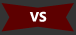
<style>
.page{position:relative;width:76px;height:35px;background:#5d0000}
.page>*{position:absolute;margin:0}
.t1{font:13.5px "SegoeUI-Bold";color:#ffffff}
</style>
<div class="page">
<p class="t1" style="left:29px;top:11px;width:18px;height:11px">VS</p>
</div>
